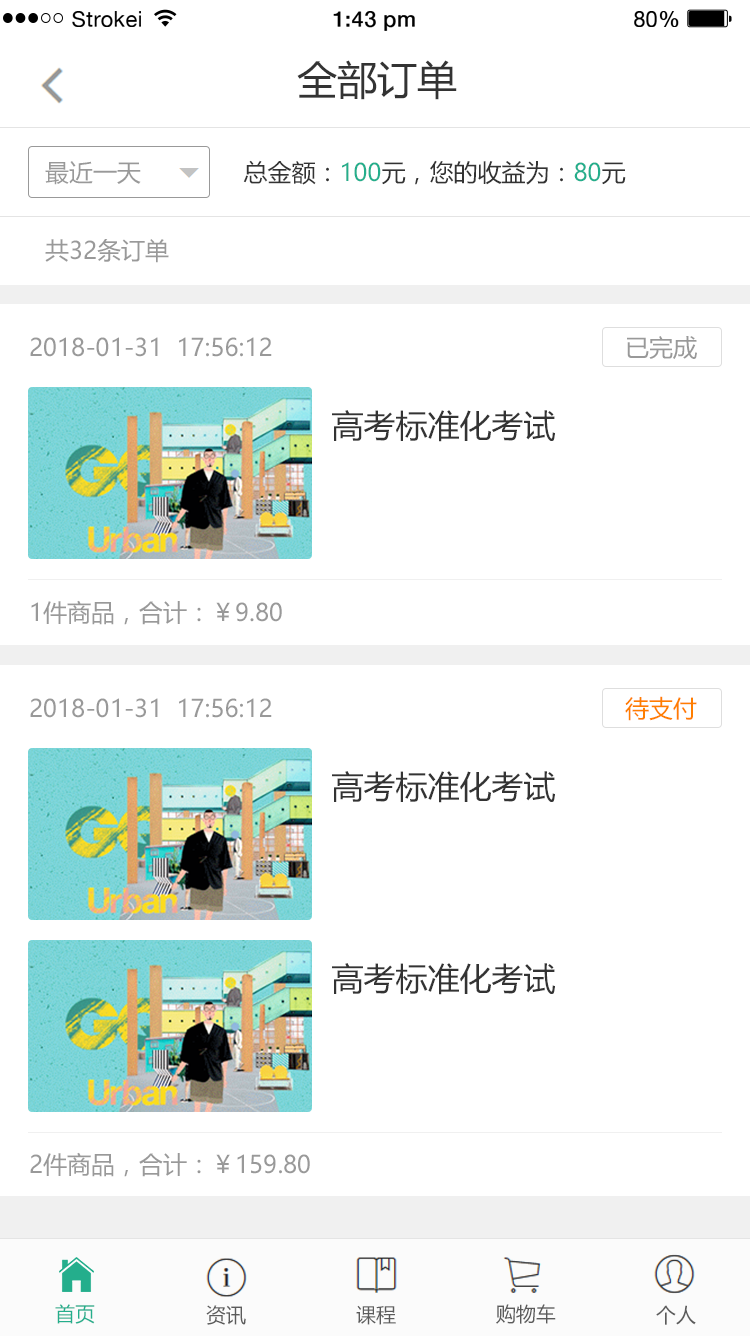
<style>
.page{position:relative;width:750px;height:1336px;background:#ffffff}
.page>*{position:absolute;margin:0}
.t1{font:21.8px "HelveticaNeue";letter-spacing:0.02em;color:#000000}
.t2{font:21.8px "HelveticaNeue-Medium";letter-spacing:0.02em;color:#000000}
.t3{font:40px "MicrosoftYaHei";color:#333333}
.t4{font:24px "MicrosoftYaHei";color:#999999}
.t5{font:24px "MicrosoftYaHei";color:#333333}
.t6{font:24px "MicrosoftYaHei";color:#24ae8c}
.t7{font:32px "MicrosoftYaHei";color:#333333}
.t8{font:24px "MicrosoftYaHei";color:#ff7e00}
.t9{font:20px "MicrosoftYaHei";color:#24ae8c}
.t10{font:20px "MicrosoftYaHei";color:#5b5b5b}
</style>
<div class="page">
<p class="t1" style="left:72px;top:11px;width:69px;height:16px">Strokei</p>
<p class="t2" style="left:333px;top:11px;width:82px;height:20px">1:43 pm</p>
<p class="t1" style="left:634px;top:11px;width:45px;height:16px">80<span class="t2">%</span></p>
<p class="t3" style="left:297px;top:60px;width:160px;height:40px">全部订单</p>
<p class="t4" style="left:45px;top:161px;width:96px;height:24px">最近一天</p>
<p class="t5" style="left:243px;top:160px;width:383px;height:25px">总金额：<span class="t6">100</span>元，您的收益为：<span class="t6">80</span>元</p>
<p class="t4" style="left:45px;top:239px;width:124px;height:24px">共32条订单</p>
<p class="t4" style="left:30px;top:337px;width:242px;height:20px">2018-01-31  17:56:12</p>
<p class="t4" style="left:627px;top:336px;width:70px;height:23px">已完成</p>
<p class="t7" style="left:332px;top:410px;width:223px;height:32px">高考标准化考试</p>
<p class="t4" style="left:31px;top:600px;width:251px;height:25px">1件商品，合计：￥9.80</p>
<p class="t4" style="left:30px;top:698px;width:242px;height:20px">2018-01-31  17:56:12</p>
<p class="t8" style="left:625px;top:696px;width:72px;height:25px">待支付</p>
<p class="t7" style="left:332px;top:771px;width:223px;height:32px">高考标准化考试</p>
<p class="t7" style="left:332px;top:963px;width:223px;height:32px">高考标准化考试</p>
<p class="t4" style="left:30px;top:1152px;width:280px;height:25px">2件商品，合计：￥159.80</p>
<p class="t9" style="left:55px;top:1304px;width:40px;height:20px">首页</p>
<p class="t10" style="left:206px;top:1305px;width:40px;height:20px">资讯</p>
<p class="t10" style="left:356px;top:1305px;width:40px;height:20px">课程</p>
<p class="t10" style="left:496px;top:1304px;width:60px;height:20px">购物车</p>
<p class="t10" style="left:656px;top:1305px;width:40px;height:20px">个人</p>
</div>
